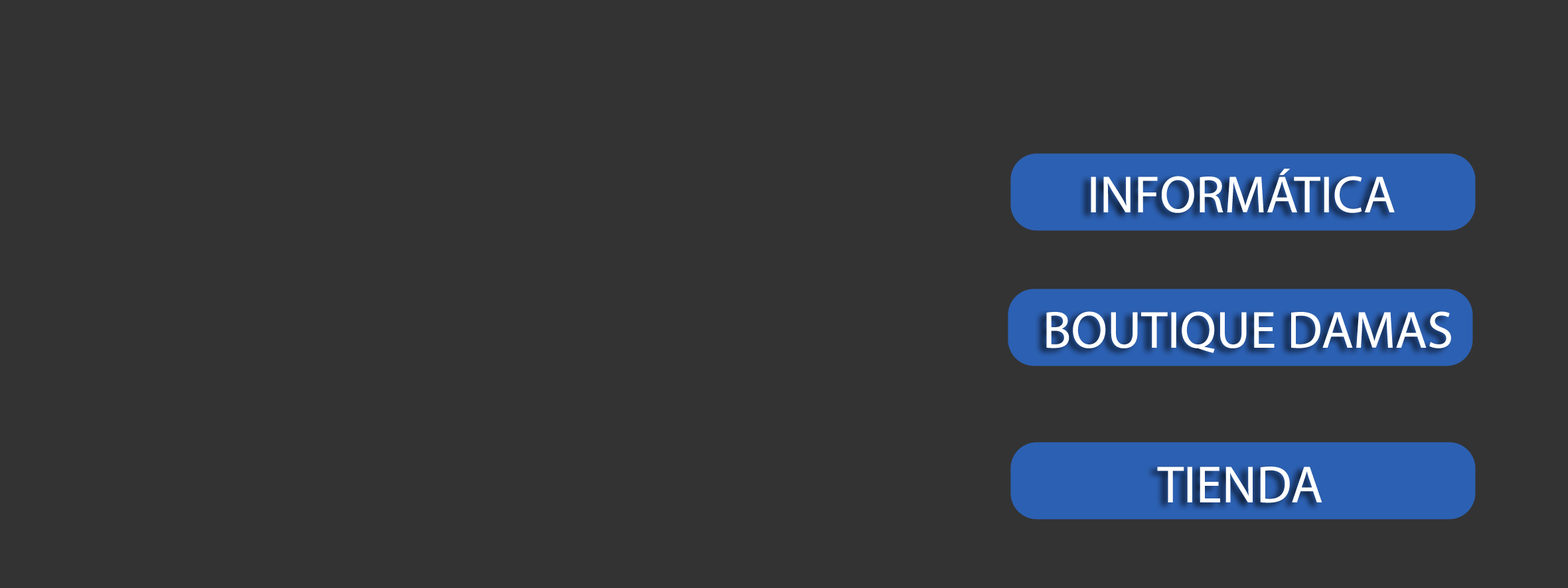
<style>
.page{position:relative;width:1568px;height:588px;background:#333333}
.page>*{position:absolute;margin:0}
.t1{font:52.5px "MyriadPro-Regular";color:#ffffff}
</style>
<div class="page">
<p class="t1" style="left:1091px;top:169px;width:304px;height:44px">INFORMÁTICA</p>
<p class="t1" style="left:1046px;top:311px;width:405px;height:42px">BOUTIQUE DAMAS</p>
<p class="t1" style="left:1157px;top:467px;width:165px;height:36px">TIENDA</p>
</div>
